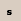
<style>
.page{position:relative;width:21px;height:21px;background:#d9cdc1}
.page>*{position:absolute;margin:0}
.t1{font:9px "Tahoma-Bold";color:#000000}
</style>
<div class="page">
<p class="t1" style="left:7px;top:10px;width:5px;height:5px">s</p>
</div>
